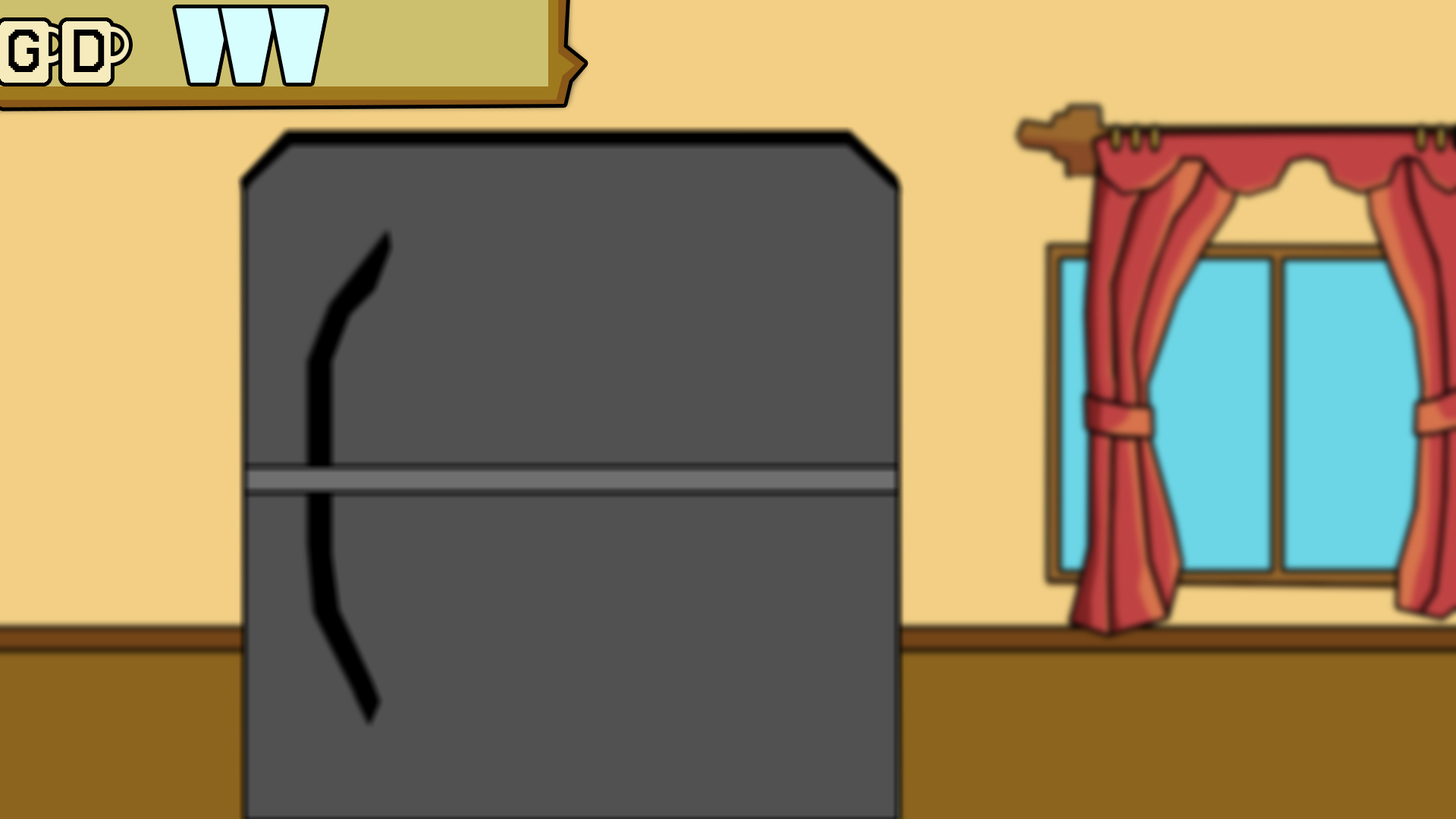
<style>
.page{position:relative;width:1456px;height:819px;background:#515151}
.page>*{position:absolute;margin:0}
.t1{font:54.6px "Retron2000";letter-spacing:0.02em;color:#000000}
</style>
<div class="page">
<p class="t1" style="left:8px;top:30px;width:31px;height:42px">G</p>
<p class="t1" style="left:74px;top:30px;width:31px;height:42px">D</p>
</div>
